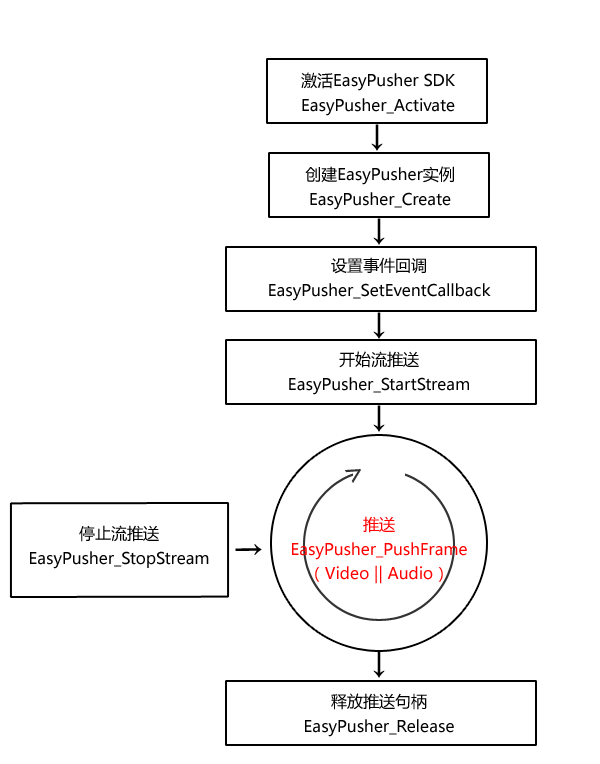
<style>
.page{position:relative;width:600px;height:764px;background:#ffffff}
.page>*{position:absolute;margin:0}
.t1{font:16px/24.6px "MicrosoftYaHei";color:#000000}
.t2{font:30px "MicrosoftYaHei";color:#000000}
.t3{font:30px "MicrosoftYaHei";color:#333333}
.t4{font:16px/24.6px "MicrosoftYaHei";color:#ff0000}
</style>
<div class="page">
<p class="t1" style="left:301px;top:72px;width:154px;height:44px;text-align:center">激活EasyPusher SDK<br>EasyPusher_Activate</p>
<p class="t2" style="left:371px;top:124px;width:12px;height:27px">↓</p>
<p class="t1" style="left:305px;top:166px;width:149px;height:44px;text-align:center">创建EasyPusher实例<br>EasyPusher_Create</p>
<p class="t2" style="left:373px;top:218px;width:12px;height:27px">↓</p>
<p class="t1" style="left:269px;top:257px;width:222px;height:44px;text-align:center">设置事件回调<br>EasyPusher_SetEventCallback</p>
<p class="t2" style="left:373px;top:312px;width:12px;height:27px">↓</p>
<p class="t1" style="left:289px;top:351px;width:180px;height:44px;text-align:center">开始流推送<br>EasyPusher_StartStream</p>
<p class="t2" style="left:373px;top:405px;width:12px;height:27px">↓</p>
<p class="t3" style="left:344px;top:469px;width:17px;height:14px;rotate:-33deg">&gt;</p>
<p class="t4" style="left:292px;top:516px;width:175px;height:68px;text-align:center">推送<br>EasyPusher_PushFrame<br>（Video || Audio）</p>
<p class="t1" style="left:30px;top:525px;width:179px;height:44px;text-align:center">停止流推送<br>EasyPusher_StopStream</p>
<p class="t2" style="left:235px;top:544px;width:27px;height:11px;rotate:-90deg">↓</p>
<p class="t1" style="left:305px;top:693px;width:149px;height:44px;text-align:center">释放推送句柄<br>EasyPusher_Release</p>
</div>
